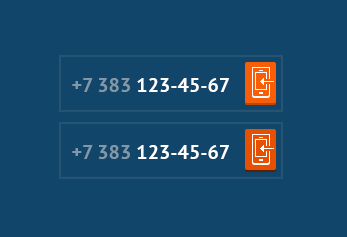
<style>
.page{position:relative;width:347px;height:237px;background:#11456a}
.page>*{position:absolute;margin:0}
.t1{font:20px "PTSans-Bold";color:#ffffff}
.t2{font:20px "PTSans-Bold";color:#8298a7}
</style>
<div class="page">
<p class="t1" style="left:72px;top:78px;width:157px;height:14px"><span class="t2">+7 383</span> 123-45-67</p>
<p class="t1" style="left:72px;top:145px;width:157px;height:14px"><span class="t2">+7 383</span> 123-45-67</p>
</div>
